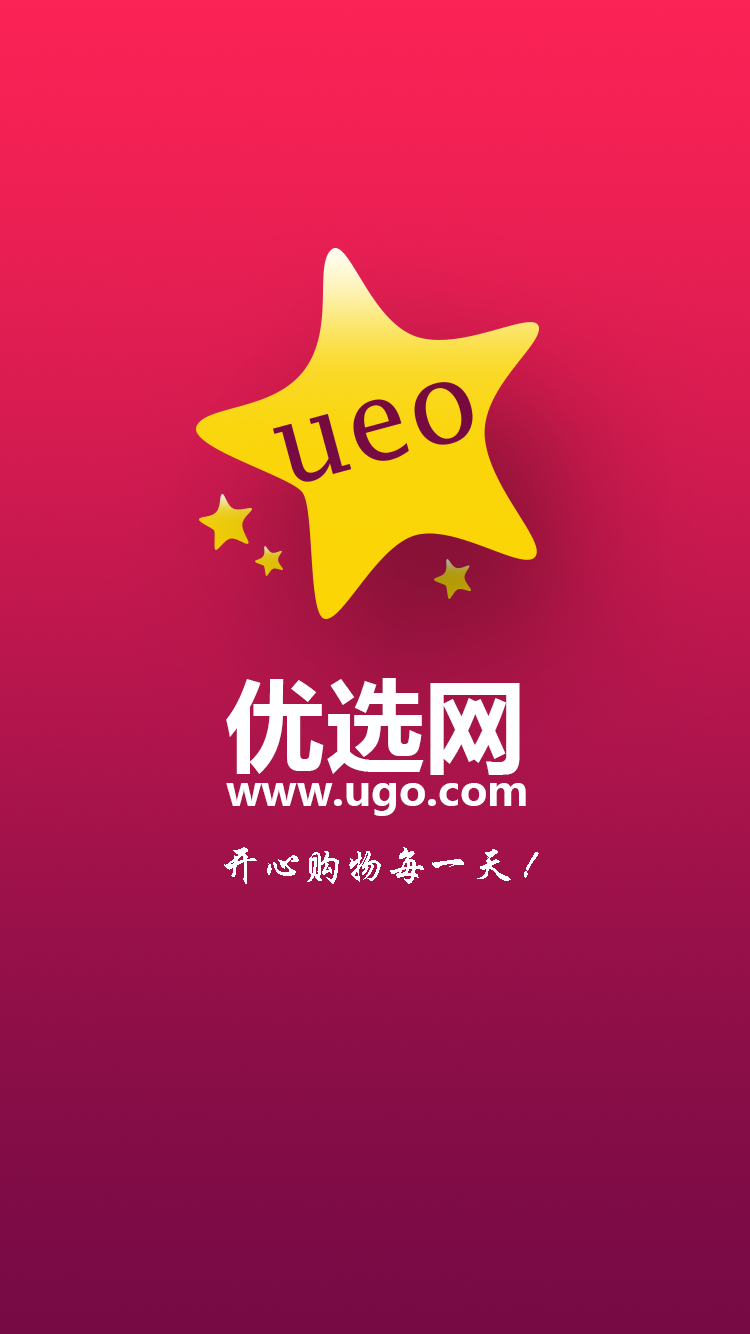
<style>
.page{position:relative;width:750px;height:1334px}
.page>*{position:absolute;margin:0}
.t1{font:100px "MicrosoftYaHei-Bold";color:#ffffff}
.t2{font:41.7px "MicrosoftYaHei-Bold";color:#ffffff}
.t3{font:41.7px "STXingkai";color:#ffffff}
</style>
<div class="page">
<p class="t1" style="left:226px;top:678px;width:294px;height:97px">优选网</p>
<p class="t2" style="left:226px;top:783px;width:300px;height:33px">www.ugo.com</p>
<p class="t3" style="left:224px;top:847px;width:315px;height:37px">开心购物每一天!</p>
</div>
